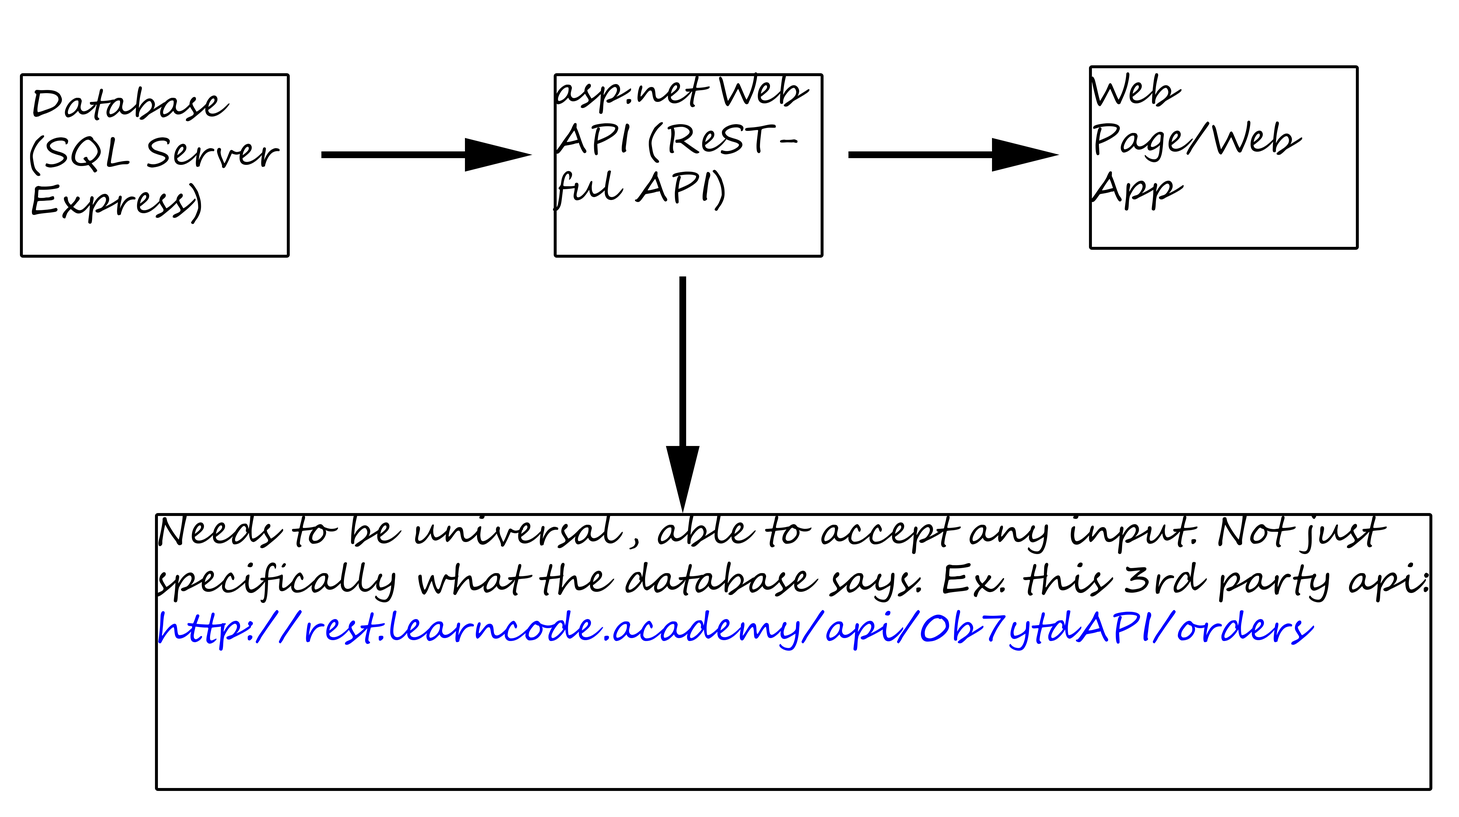
<style>
.page{position:relative;width:1459px;height:817px;background:#ffffff}
.page>*{position:absolute;margin:0}
.t1{font:40.3px "SegoeScript";color:#000000}
.t2{font:40.3px "SegoeScript";color:#0000ff}
</style>
<div class="page">
<p class="t1" style="left:553px;top:72px;width:256px;height:139px">asp.net Web API (ReSTful API)</p>
<p class="t1" style="left:1089px;top:72px;width:213px;height:139px">Web Page/Web App</p>
<p class="t1" style="left:30px;top:86px;width:250px;height:138px">Database <br>(SQL Server Express)</p>
<p class="t1" style="left:156px;top:513px;width:1273px;height:138px">Needs to be universal, able to accept any input. Not just specifically what the database says. Ex. this 3rd party api: <br><span class="t2">http://rest.learncode.academy/api/0b7ytdAPI/orders</span></p>
</div>
